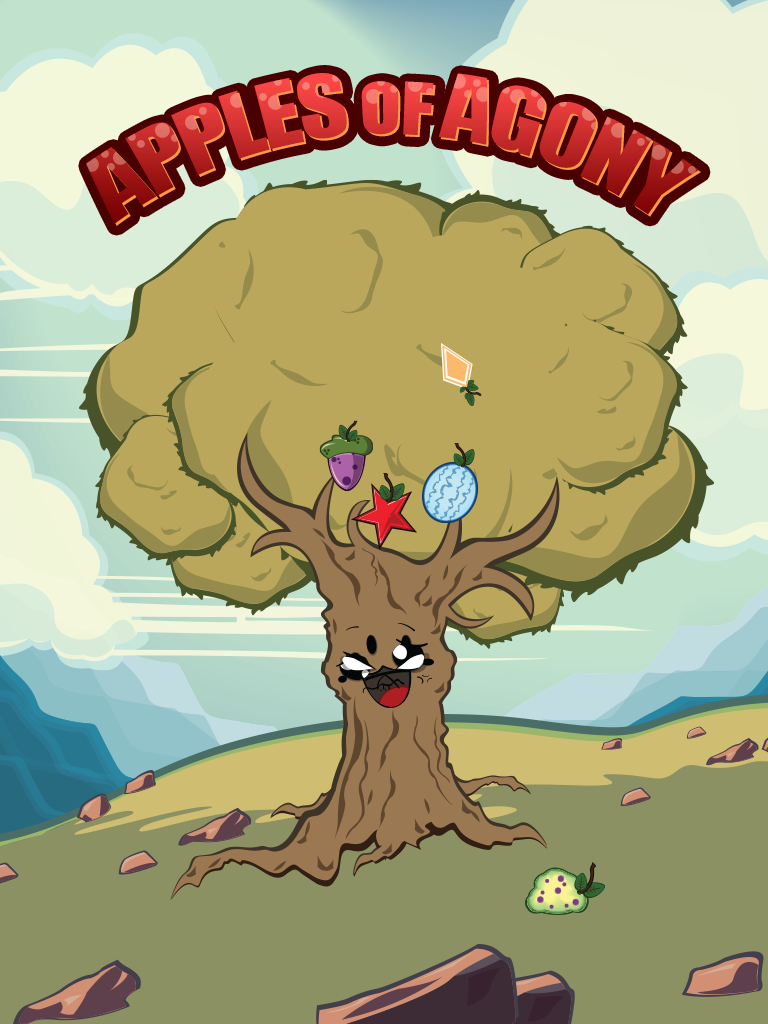
<style>
.page{position:relative;width:768px;height:1024px}
.page>*{position:absolute;margin:0}
.t1{font:82px "Impact";letter-spacing:-0.025em}
.t2{font:68px "Impact";letter-spacing:-0.025em}
</style>
<div class="page">
<p class="t1" style="left:86px;top:73px;width:613px;height:151px">APPLES <span class="t2">OF </span>AGONY</p>
<p class="t1" style="left:88px;top:75px;width:613px;height:151px">APPLES <span class="t2">OF </span>AGONY</p>
</div>
